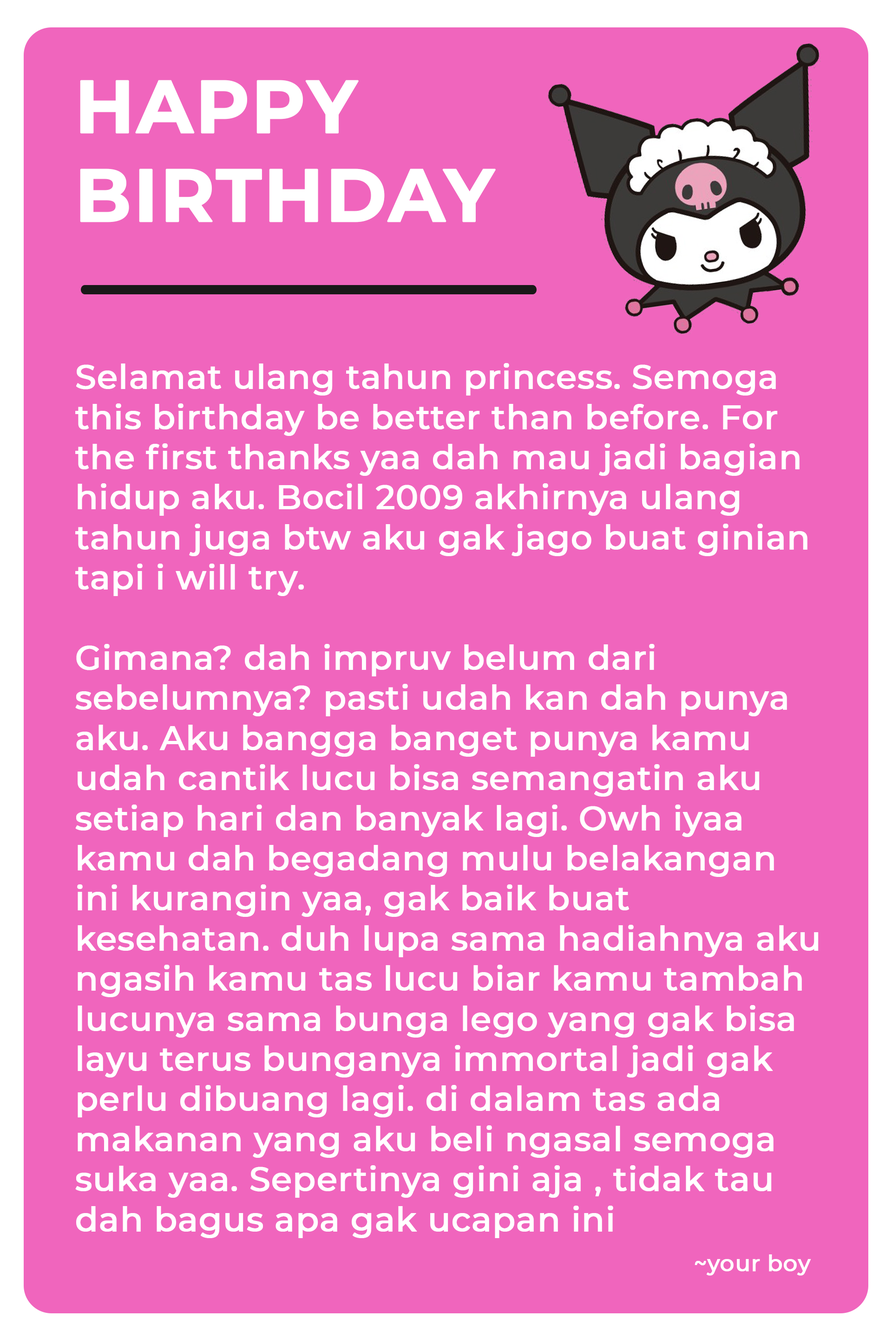
<style>
.page{position:relative;width:892px;height:1337px;background:#f065bd}
.page>*{position:absolute;margin:0}
.t1{font:73.8px "Montserrat-Bold";letter-spacing:0.005em;color:#ffffff;font-weight:bold}
.t2{font:33.4px "Montserrat-Medium";letter-spacing:0.005em;color:#ffffff;font-weight:bold}
.t3{font:22.3px "Montserrat-Medium";letter-spacing:0.005em;color:#ffffff;font-weight:bold}
</style>
<div class="page">
<p class="t1" style="left:80px;top:80px;width:415px;height:142px">HAPPY<br>BIRTHDAY</p>
<p class="t2" style="left:75px;top:363px;width:743px;height:913px">Selamat ulang tahun princess. Semoga this birthday be better than before. For the first thanks yaa dah mau jadi bagian hidup aku. Bocil 2009 akhirnya ulang tahun juga btw aku gak jago buat ginian<br>tapi i will try. <br><br>Gimana? dah impruv belum dari sebelumnya? pasti udah kan dah punya aku. Aku bangga banget punya kamu udah cantik lucu bisa semangatin aku setiap hari dan banyak lagi. Owh iyaa kamu dah begadang mulu belakangan ini kurangin yaa, gak baik buat kesehatan. duh lupa sama hadiahnya aku ngasih kamu tas lucu biar kamu tambah lucunya sama bunga lego yang gak bisa layu terus bunganya immortal jadi gak perlu dibuang lagi. di dalam tas ada makanan yang aku beli ngasal semoga suka yaa. Sepertinya gini aja , tidak tau dah bagus apa gak ucapan ini<br>                                     <span class="t3">~your boy</span></p>
</div>
